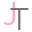
<style>
.page{position:relative;width:32px;height:32px;background:#ffffff}
.page>*{position:absolute;margin:0}
.t1{font:33.5px "MavenProRegular";color:#ffa8c3}
.t2{font:33.3px "MavenProRegular";color:#757575}
</style>
<div class="page">
<p class="t1" style="left:4px;top:2px;width:11px;height:23px">J</p>
<p class="t2" style="left:10px;top:8px;width:19px;height:22px">T</p>
</div>
